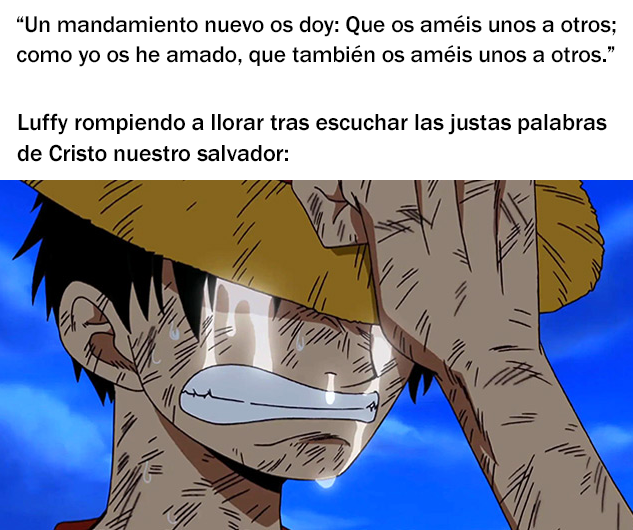
<style>
.page{position:relative;width:633px;height:530px;background:#ffffff}
.page>*{position:absolute;margin:0}
.t1{font:23.4px "FranklinGothic-Medium";color:#000000}
.t2{font:24px "FranklinGothic-Medium";color:#000000}
</style>
<div class="page">
<p class="t1" style="left:17px;top:15px;width:599px;height:52px;text-align:center">“Un mandamiento nuevo os doy: Que os améis unos a otros;<br>como yo os he amado, que también os améis unos a otros.”</p>
<p class="t2" style="left:17px;top:113px;width:590px;height:49px">Luffy rompiendo a llorar tras escuchar las justas palabras<br>de Cristo nuestro salvador:</p>
</div>
